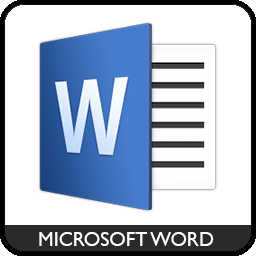
<style>
.page{position:relative;width:256px;height:256px;background:#ffffff}
.page>*{position:absolute;margin:0}
.t1{font:20px "GillSansMT";color:#ffffff}
</style>
<div class="page">
<p class="t1" style="left:39px;top:232px;width:175px;height:14px">MICROSOFT WORD</p>
</div>
